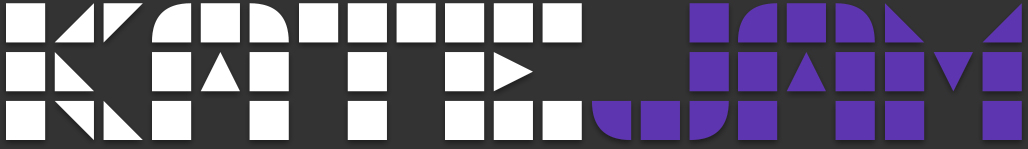
<style>
.page{position:relative;width:1028px;height:149px;background:#333333}
.page>*{position:absolute;margin:0}
.t1{font:200px "GeoGrid9";color:#ffffff;text-transform:uppercase}
.t2{font:200px "GeoGrid9";color:#5e35b1;text-transform:uppercase}
</style>
<div class="page">
<p class="t1" style="left:6px;top:3px;width:1016px;height:137px">Kate<span class="t2">Jam</span></p>
</div>
